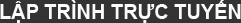
<style>
.page{position:relative;width:241px;height:23px;background:#333333}
.page>*{position:absolute;margin:0}
.t1{font:20px "Arial-BoldMT";color:#fcfbfb}
</style>
<div class="page">
<p class="t1" style="left:0px;top:0px;width:241px;height:23px">LẬP TRÌNH TRỰC TUYẾN</p>
</div>
